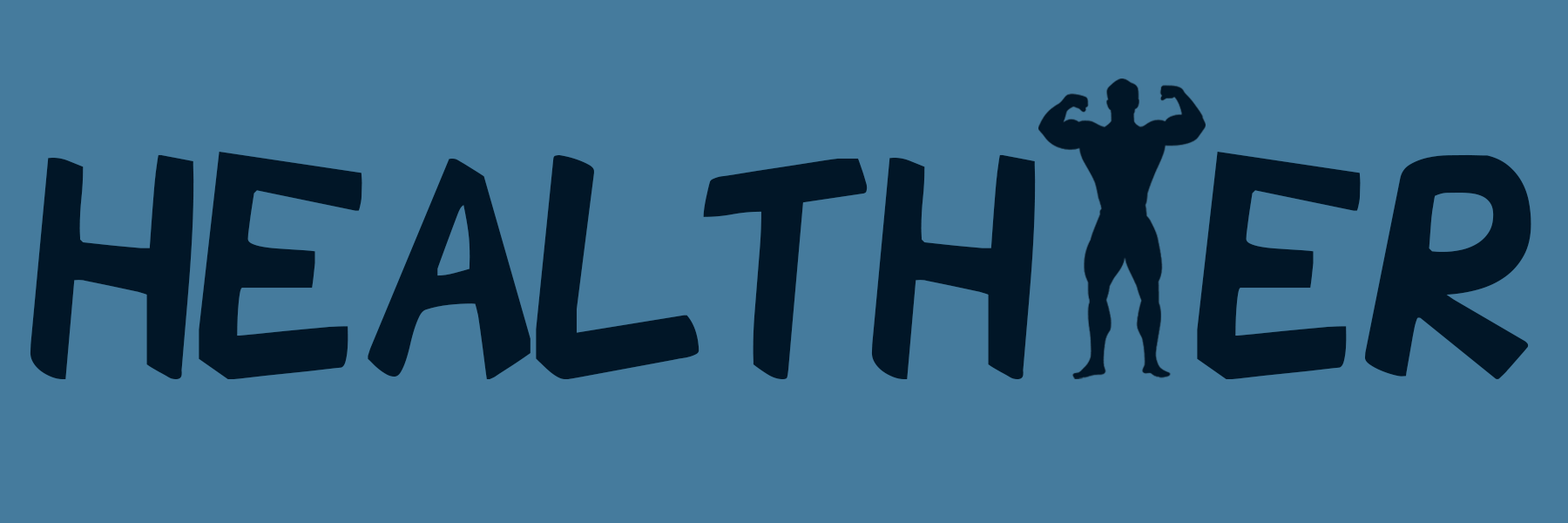
<style>
.page{position:relative;width:1568px;height:523px;background:#457b9d}
.page>*{position:absolute;margin:0}
.t1{font:289.8px "SharkParty";color:#011627}
</style>
<div class="page">
<p class="t1" style="left:30px;top:151px;width:1006px;height:228px">HEALTH</p>
<p class="t1" style="left:1197px;top:151px;width:334px;height:228px">ER</p>
</div>
